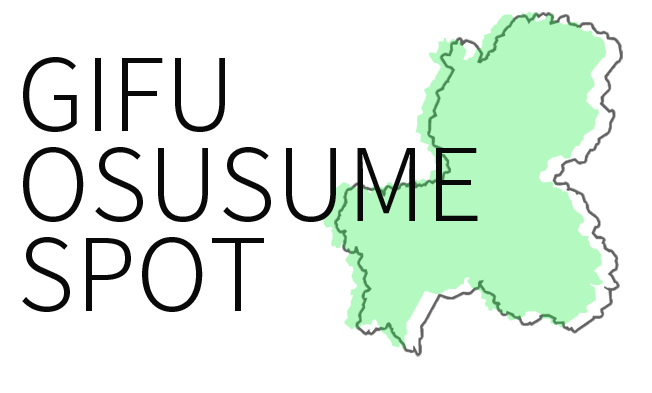
<style>
.page{position:relative;width:652px;height:393px;background:#ffffff}
.page>*{position:absolute;margin:0}
.t1{font:100px/90px "NotoSansJP-Light";color:#090909}
.t2{font:100px/80px "NotoSansJP-Light";color:#090909}
</style>
<div class="page">
<p class="t1" style="left:22px;top:57px;width:456px;height:255px">GIFU<br>OSUSUME<br><span class="t2">SPOT</span></p>
</div>
